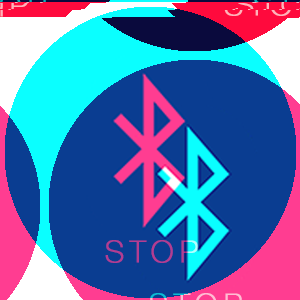
<style>
.page{position:relative;width:300px;height:300px;background:#0a3d91}
.page>*{position:absolute;margin:0}
.t1{font:30px "HelveticaNeue-Thin";letter-spacing:0.2em;font-weight:bold}
</style>
<div class="page">
<p class="t1" style="left:105px;top:238px;width:93px;height:23px">STOP</p>
</div>
